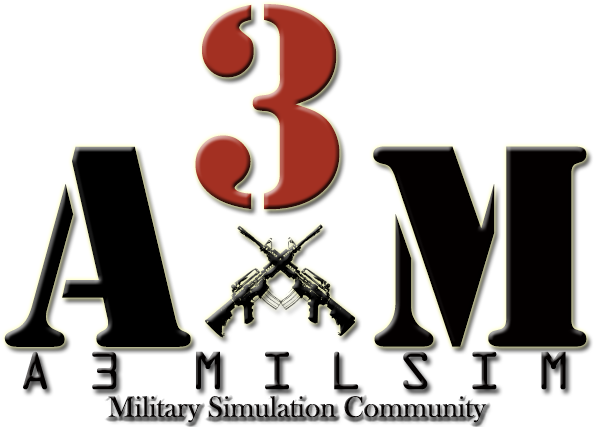
<style>
.page{position:relative;width:594px;height:427px;background:#ffffff}
.page>*{position:absolute;margin:0}
.t1{font:300px "Stencil";color:#a33022}
.t2{font:300px "Stencil";color:#000000}
.t3{font:300px "Stencil";color:#030000}
.t4{font:48px "OCRAStd";color:#030000}
.t5{font:30px "BaskOldFace";color:#030000}
</style>
<div class="page">
<p class="t1" style="left:195px;top:4px;width:145px;height:206px">3</p>
<p class="t2" style="left:4px;top:146px;width:187px;height:201px">A</p>
<p class="t3" style="left:373px;top:146px;width:214px;height:201px">M</p>
<p class="t4" style="left:23px;top:351px;width:543px;height:39px">A 3  M I L S I M</p>
<p class="t5" style="left:108px;top:396px;width:378px;height:27px">Military Simulation Community</p>
</div>
